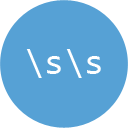
<style>
.page{position:relative;width:128px;height:128px;background:#56a1d5}
.page>*{position:absolute;margin:0}
.t1{font:36px "Consolas";color:#ffffff}
</style>
<div class="page">
<p class="t1" style="left:26px;top:49px;width:75px;height:29px">\s\s</p>
</div>
